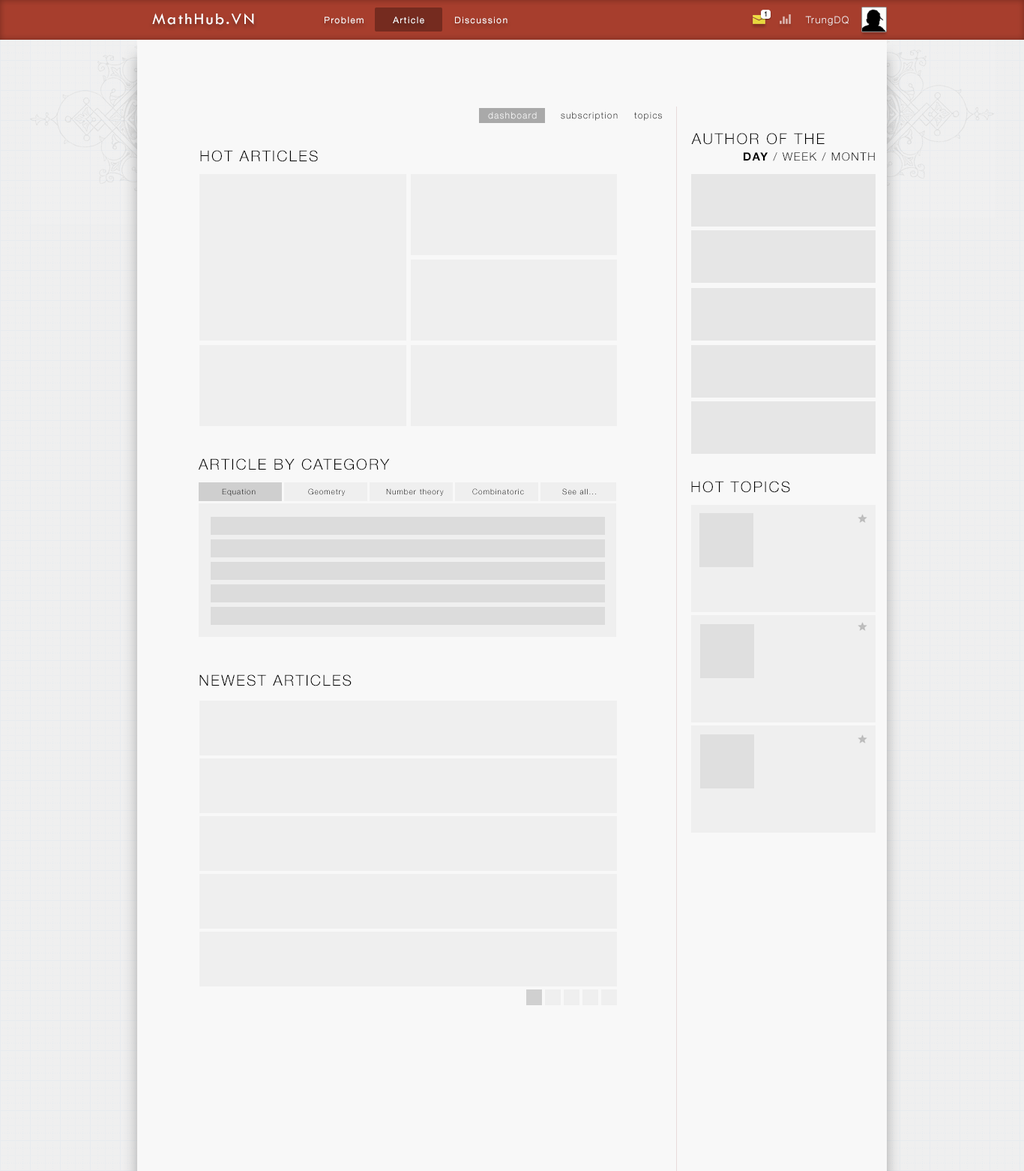
<style>
.page{position:relative;width:1024px;height:1171px;background:#f8f8f8}
.page>*{position:absolute;margin:0}
.t1{font:16.5px "TwCenMT-Regular";letter-spacing:0.1em;color:#ffffff;scale:1.03 1}
.t2{font:9px "HelveticaNeueLTStd-Roman";letter-spacing:0.1em;color:#ffffff}
.t3{font:7.5px "HelveticaNeueLTStd-Bd";letter-spacing:0.1em;color:#000000;scale:0.88 1}
.t4{font:9.7px "HelveticaNeueLTStd-Lt";letter-spacing:0.1em}
.t5{font:9px "HelveticaNeueLTStd-Lt";letter-spacing:0.1em;color:#ffffff}
.t6{font:9px "HelveticaNeueLTStd-Lt";letter-spacing:0.1em}
.t7{font:11.3px/16.5px "HelveticaNeueLTStd-Lt";letter-spacing:0.1em;color:#000000;text-transform:uppercase}
.t8{font:15.1px/16.5px "HelveticaNeueLTStd-Lt";letter-spacing:0.1em;color:#000000;text-transform:uppercase}
.t9{font:11.3px/16.5px "HelveticaNeueLTStd-Bd";letter-spacing:0.1em;color:#000000;text-transform:uppercase}
.t10{font:15px "HelveticaNeueLTStd-Lt";letter-spacing:0.1em;color:#000000;text-transform:uppercase}
.t11{font:7.5px "HelveticaNeueLTStd-Lt";letter-spacing:0.1em}
.t12{font:7.5px "HelveticaNeueLTStd-Lt";letter-spacing:0.1em;color:#000000}
</style>
<div class="page">
<p class="t1" style="left:152px;top:13px;width:102px;height:12px">MathHub.VN</p>
<p class="t2" style="left:325px;top:16px;width:39px;height:8px">Problem</p>
<p class="t2" style="left:393px;top:16px;width:31px;height:8px">Article</p>
<p class="t2" style="left:455px;top:16px;width:53px;height:8px">Discussion</p>
<p class="t3" style="left:764px;top:11px;width:3px;height:5px">1</p>
<p class="t4" style="left:805px;top:16px;width:44px;height:9px">TrungDQ</p>
<p class="t5" style="left:488px;top:112px;width:49px;height:7px">dashboard</p>
<p class="t6" style="left:561px;top:112px;width:57px;height:9px">subscription</p>
<p class="t6" style="left:634px;top:112px;width:28px;height:9px">topics</p>
<p class="t7" style="left:691px;top:133px;width:184px;height:28px"><span class="t8">Author of the <br></span><span class="t9">            day </span>/ week / month</p>
<p class="t10" style="left:200px;top:150px;width:118px;height:12px">Hot articles</p>
<p class="t10" style="left:198px;top:458px;width:192px;height:12px">ARTICLE BY CATEGORY</p>
<p class="t10" style="left:691px;top:481px;width:99px;height:12px">HOT TOPICS</p>
<p class="t11" style="left:222px;top:488px;width:34px;height:8px">Equation</p>
<p class="t12" style="left:308px;top:488px;width:38px;height:8px">Geometry</p>
<p class="t11" style="left:386px;top:488px;width:58px;height:8px">Number theory</p>
<p class="t11" style="left:472px;top:488px;width:52px;height:7px">Combinatoric</p>
<p class="t11" style="left:562px;top:488px;width:34px;height:7px">See all...</p>
<p class="t10" style="left:199px;top:674px;width:153px;height:12px">Newest articles</p>
</div>
